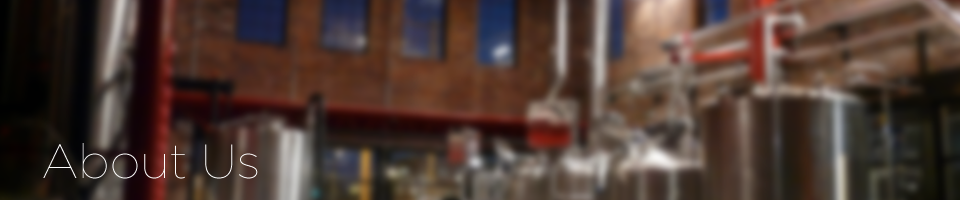
<style>
.page{position:relative;width:960px;height:200px}
.page>*{position:absolute;margin:0}
.t1{font:48px "Gotham-Thin";color:#ffffff}
</style>
<div class="page">
<p class="t1" style="left:43px;top:143px;width:215px;height:36px">About Us</p>
</div>
